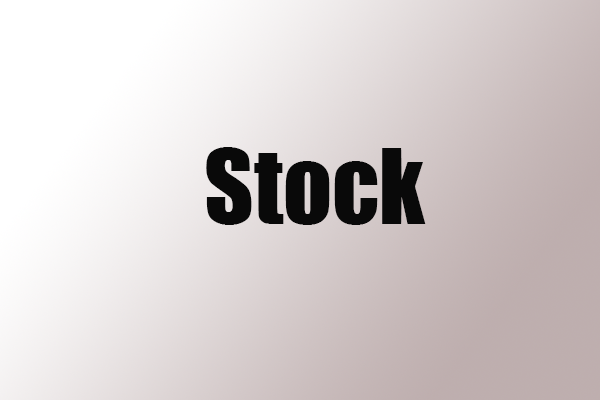
<style>
.page{position:relative;width:600px;height:400px}
.page>*{position:absolute;margin:0}
.t1{font:96px "Impact";color:#090909}
</style>
<div class="page">
<p class="t1" style="left:206px;top:147px;width:220px;height:78px">Stock</p>
</div>
